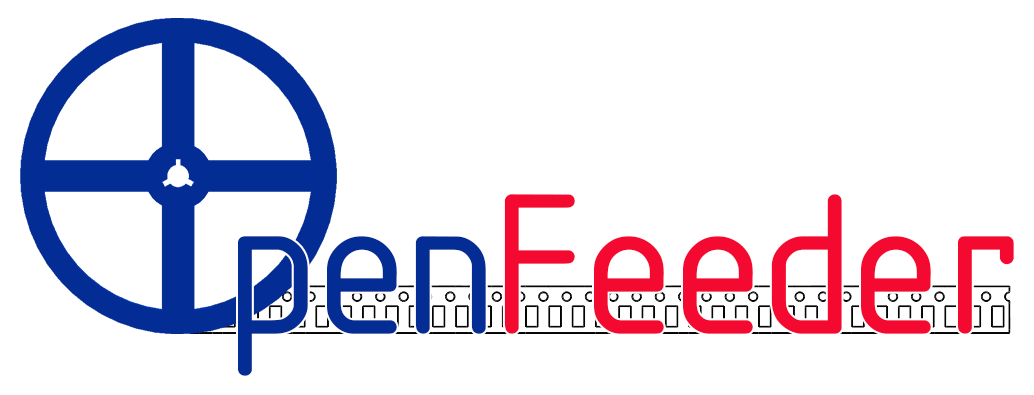
<style>
.page{position:relative;width:1034px;height:395px;background:#ffffff}
.page>*{position:absolute;margin:0}
.t1{font:200px "SWLink";letter-spacing:-0.35em;color:#f40930;font-weight:bold}
.t2{font:200px "SWLink";letter-spacing:-0.35em;color:#032c94;font-weight:bold}
</style>
<div class="page">
<p class="t1" style="left:238px;top:194px;width:776px;height:182px"><span class="t2">pen</span>Feeder</p>
</div>
